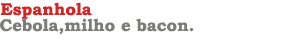
<style>
.page{position:relative;width:300px;height:50px;background:#ffffff}
.page>*{position:absolute;margin:0}
.t1{font:17px "BookmanOldStyle-Bold";color:#d42525}
.t2{font:17px "BookmanOldStyle-Bold";color:#7c7c79}
</style>
<div class="page">
<p class="t1" style="left:1px;top:2px;width:91px;height:17px">Espanhola</p>
<p class="t2" style="left:0px;top:18px;width:194px;height:17px">Cebola,milho e bacon.</p>
</div>
